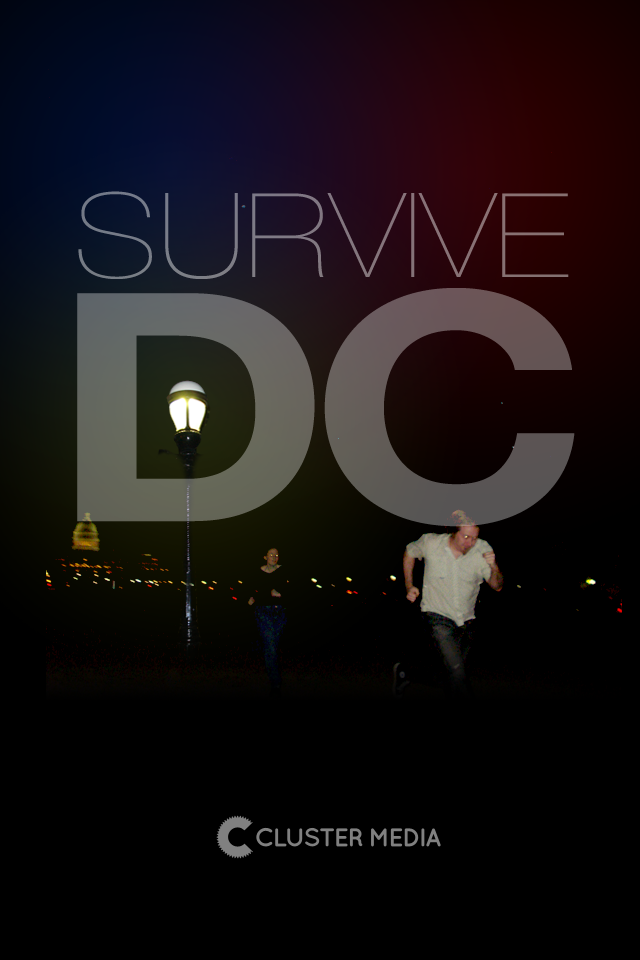
<style>
.page{position:relative;width:640px;height:960px;background:#000000}
.page>*{position:absolute;margin:0}
.t1{font:117px "HelveticaNeue-UltraLight";color:#817781;scale:1.18 1}
.t2{font:318.8px "HelveticaNeue-Bold";letter-spacing:-0.05em;color:#656459;scale:1.18 1}
</style>
<div class="page">
<p class="t1" style="left:78px;top:191px;width:491px;height:88px">SURVIVE</p>
<p class="t1" style="left:78px;top:191px;width:491px;height:88px">SURVIVE</p>
<p class="t2" style="left:77px;top:288px;width:498px;height:239px">DC</p>
<p class="t2" style="left:77px;top:288px;width:498px;height:239px">DC</p>
</div>
